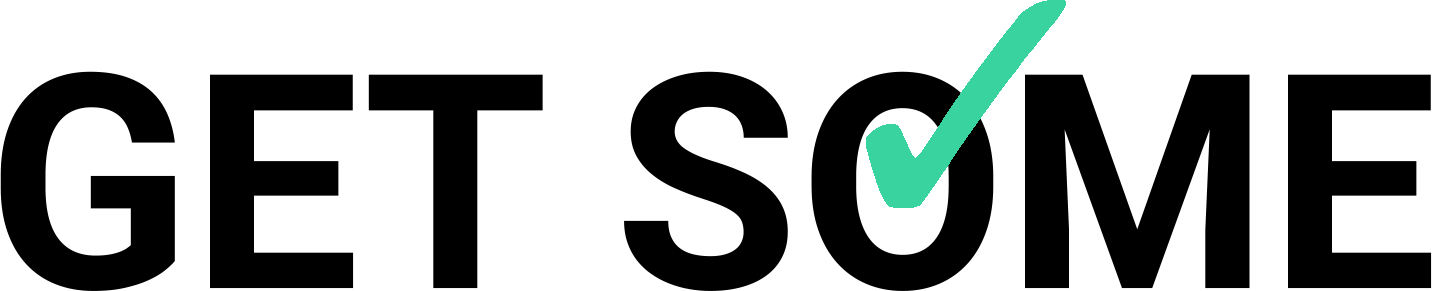
<style>
.page{position:relative;width:1432px;height:291px;background:#ffffff}
.page>*{position:absolute;margin:0}
.t1{font:300px "Roboto-Bold";color:#000000}
</style>
<div class="page">
<p class="t1" style="left:0px;top:71px;width:1432px;height:220px">GET SOME</p>
</div>
